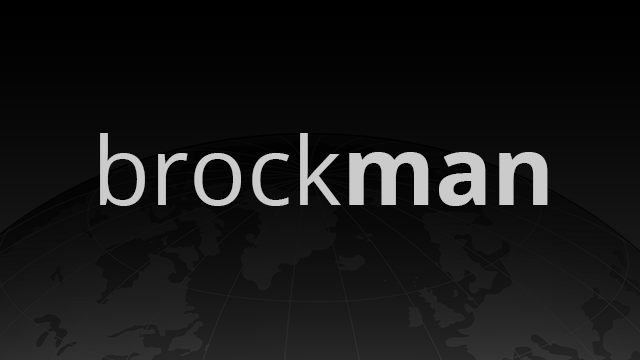
<style>
.page{position:relative;width:640px;height:360px}
.page>*{position:absolute;margin:0}
.t1{font:95px "OpenSans";color:#cbcbcb}
.t2{font:95px "OpenSans-Bold";color:#cbcbcb}
</style>
<div class="page">
<p class="t1" style="left:100px;top:133px;width:448px;height:73px">brock<span class="t2">man</span></p>
</div>
